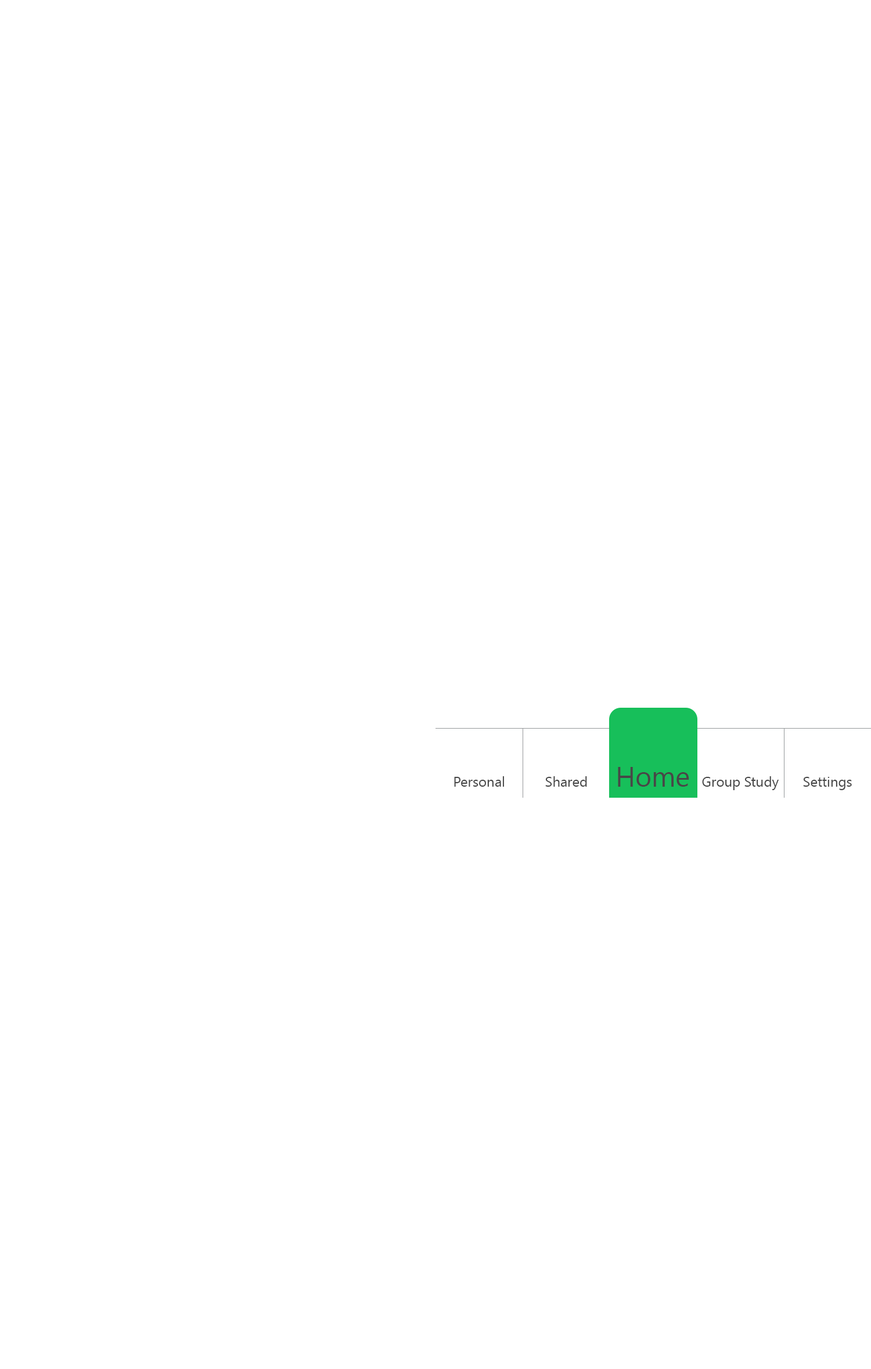
<style>
.page{position:relative;width:871px;height:1369px;background:#ffffff}
.page>*{position:absolute;margin:0}
.t1{font:27.9px "SegoeUI";color:#474747}
.t2{font:13.9px "SegoeUI";color:#474747}
</style>
<div class="page">
<p class="t1" style="left:618px;top:767px;width:71px;height:20px">Home</p>
<p class="t2" style="left:454px;top:776px;width:50px;height:11px">Personal</p>
<p class="t2" style="left:545px;top:776px;width:42px;height:11px">Shared</p>
<p class="t2" style="left:702px;top:776px;width:77px;height:14px">Group Study</p>
<p class="t2" style="left:803px;top:777px;width:49px;height:13px">Settings</p>
</div>
